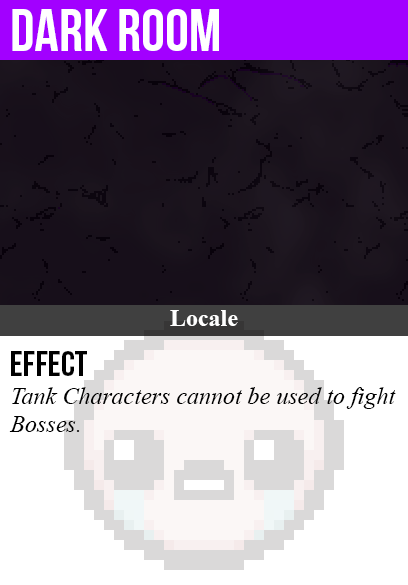
<style>
.page{position:relative;width:408px;height:585px;background:#ffffff}
.page>*{position:absolute;margin:0}
.t1{font:60px "BebasNeue";color:#ffffff}
.t2{font:24px "TimesNewRomanPS-BoldMT";color:#ffffff}
.t3{font:36px "BebasNeue";color:#000000}
.t4{font:24px "TimesNewRomanPS-ItalicMT";color:#000000}
</style>
<div class="page">
<p class="t1" style="left:12px;top:9px;width:207px;height:42px">dark room</p>
<p class="t2" style="left:170px;top:310px;width:68px;height:16px">Locale</p>
<p class="t3" style="left:11px;top:351px;width:76px;height:25px">Effect</p>
<p class="t4" style="left:9px;top:387px;width:387px;height:45px">Tank Characters cannot be used to fight<br>Bosses.</p>
</div>
